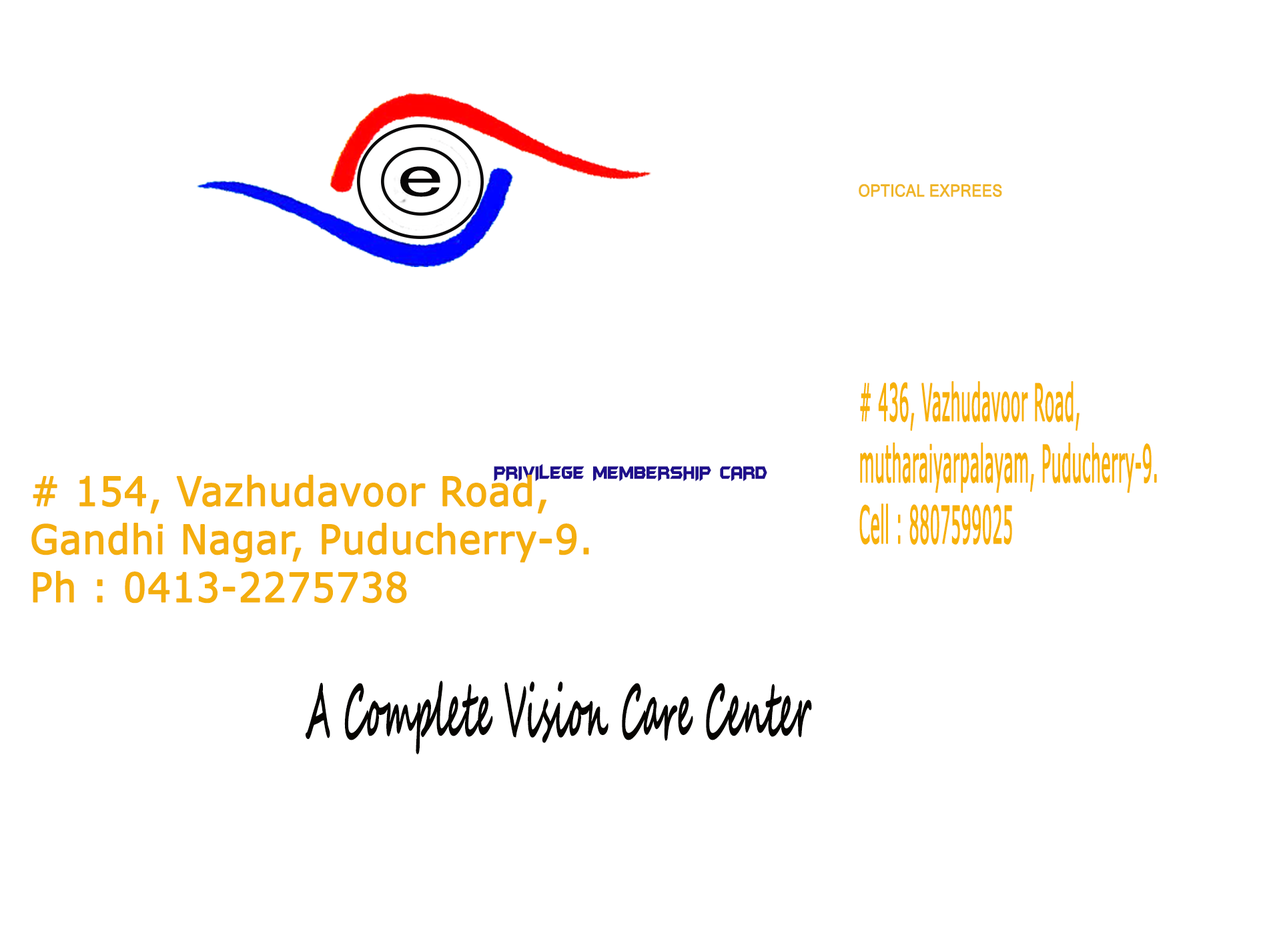
<style>
.page{position:relative;width:1261px;height:946px;background:#ffffff}
.page>*{position:absolute;margin:0}
.t1{font:55.7px "MicrosoftSansSerif";color:#080606;scale:1.47 1}
.t2{font:16.6px "MicrosoftSansSerif";color:#efb528;font-variant:small-caps;font-weight:bold;scale:0.9 1}
.t3{font:51px "MSReferenceSansSerif";color:#f7b109;font-weight:bold;scale:0.31 1}
.t4{font:20.8px "BatmanForeverAlternate";color:#1f108b;font-variant:small-caps;font-weight:bold;scale:0.7 1}
.t5{font:40px "MSReferenceSansSerif";color:#f4ae0e;font-weight:bold;scale:0.92 1}
.t6{font:70.9px "SegoeScript";color:#060401;font-weight:bold;scale:0.41 1}
</style>
<div class="page">
<p class="t1" style="left:400px;top:166px;width:40px;height:31px">e</p>
<p class="t2" style="left:859px;top:183px;width:143px;height:14px">OPTICAL EXPREES</p>
<p class="t3" style="left:859px;top:381px;width:298px;height:163px"># 436, Vazhudavoor Road,<br>mutharaiyarpalayam, Puducherry-9.<br>Cell : 8807599025</p>
<p class="t4" style="left:494px;top:464px;width:273px;height:17px">PRIVILEGE MEMBERSHIP CARD</p>
<p class="t5" style="left:31px;top:474px;width:558px;height:129px"># 154, Vazhudavoor Road,<br>Gandhi Nagar, Puducherry-9.<br>Ph : 0413-2275738</p>
<p class="t6" style="left:306px;top:680px;width:506px;height:74px">A Complete Vision Care Center</p>
</div>
